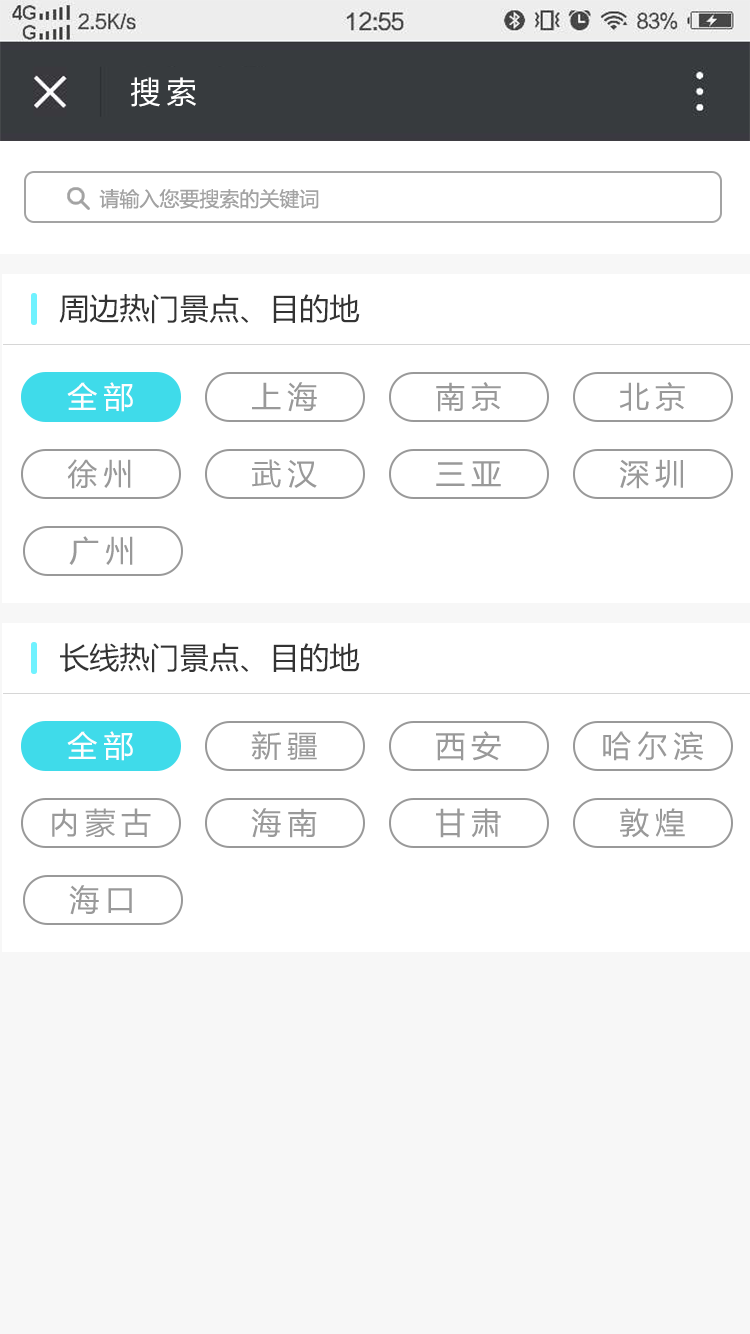
<style>
.page{position:relative;width:750px;height:1334px;background:#ffffff}
.page>*{position:absolute;margin:0}
.t1{font:30px "MicrosoftYaHei";letter-spacing:0.2em;color:#ffffff}
.t2{font:20px "MicrosoftYaHei";color:#a3a3a3}
.t3{font:30px "MicrosoftYaHei";color:#333333}
.t4{font:30px "MicrosoftYaHei";letter-spacing:0.2em;color:#fefefe}
.t5{font:30px "MicrosoftYaHei";letter-spacing:0.2em;color:#999999}
</style>
<div class="page">
<p class="t1" style="left:131px;top:77px;width:65px;height:30px">搜索</p>
<p class="t2" style="left:99px;top:189px;width:220px;height:20px">请输入您要搜索的关键词</p>
<p class="t3" style="left:59px;top:294px;width:301px;height:30px">周边热门景点、目的地</p>
<p class="t4" style="left:67px;top:382px;width:66px;height:30px">全部</p>
<p class="t5" style="left:252px;top:382px;width:65px;height:30px">上海</p>
<p class="t5" style="left:436px;top:382px;width:65px;height:30px">南京</p>
<p class="t5" style="left:619px;top:382px;width:66px;height:29px">北京</p>
<p class="t5" style="left:67px;top:459px;width:64px;height:30px">徐州</p>
<p class="t5" style="left:252px;top:459px;width:65px;height:29px">武汉</p>
<p class="t5" style="left:436px;top:461px;width:65px;height:26px">三亚</p>
<p class="t5" style="left:619px;top:459px;width:64px;height:30px">深圳</p>
<p class="t5" style="left:69px;top:536px;width:64px;height:29px">广州</p>
<p class="t3" style="left:60px;top:643px;width:300px;height:30px">长线热门景点、目的地</p>
<p class="t4" style="left:67px;top:731px;width:66px;height:30px">全部</p>
<p class="t5" style="left:251px;top:731px;width:66px;height:29px">新疆</p>
<p class="t5" style="left:436px;top:731px;width:65px;height:30px">西安</p>
<p class="t5" style="left:603px;top:731px;width:100px;height:30px">哈尔滨</p>
<p class="t5" style="left:52px;top:808px;width:99px;height:29px">内蒙古</p>
<p class="t5" style="left:251px;top:808px;width:66px;height:30px">海南</p>
<p class="t5" style="left:436px;top:808px;width:65px;height:30px">甘肃</p>
<p class="t5" style="left:620px;top:808px;width:65px;height:30px">敦煌</p>
<p class="t5" style="left:69px;top:885px;width:63px;height:30px">海口</p>
</div>
